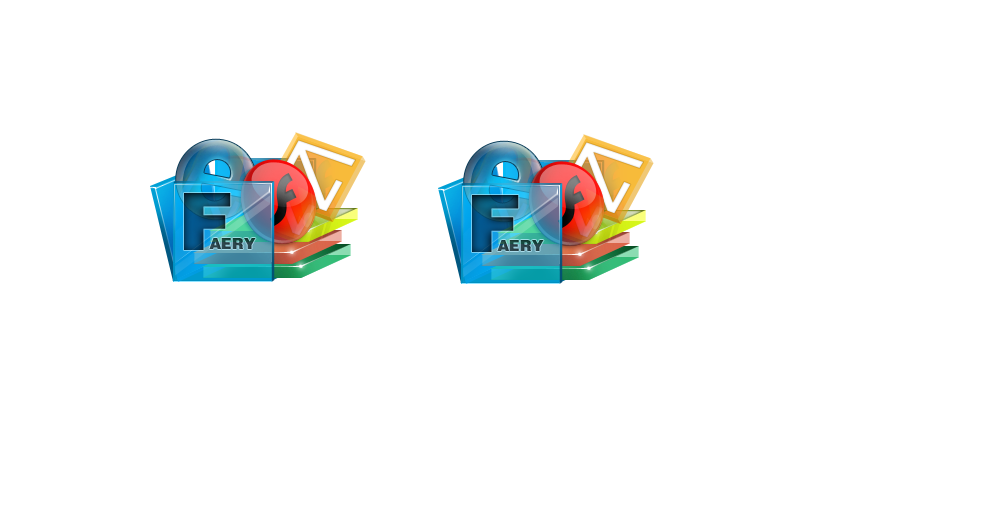
<style>
.page{position:relative;width:993px;height:532px;background:#ffffff}
.page>*{position:absolute;margin:0}
.t1{font:82.6px "UltraBlack";letter-spacing:-0.07em;text-transform:uppercase}
.t2{font:16px "UltraBlack";color:#264545;text-transform:uppercase}
</style>
<div class="page">
<p class="t1" style="left:184px;top:193px;width:47px;height:57px">f</p>
<p class="t2" style="left:209px;top:238px;width:47px;height:11px">aery</p>
</div>
